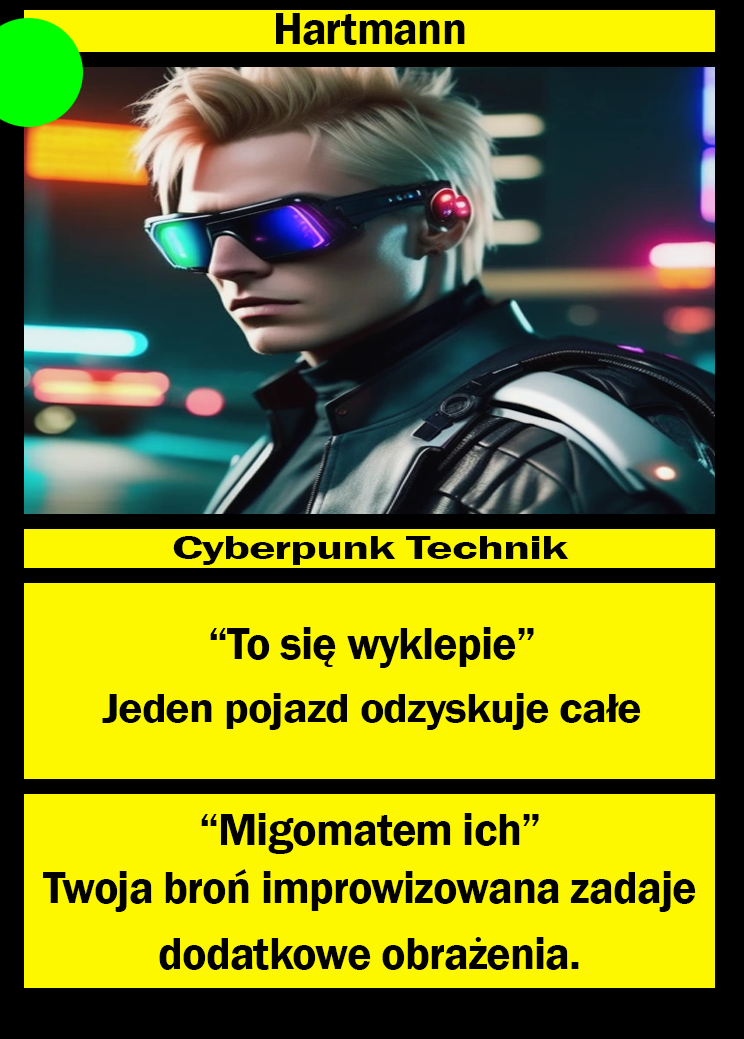
<style>
.page{position:relative;width:744px;height:1039px;background:#fdf800}
.page>*{position:absolute;margin:0}
.t1{font:45.8px "FranklinGothic-Demi";letter-spacing:-0.02em;color:#000000}
.t2{font:34px "FranklinGothic-Demi";letter-spacing:-0.02em;color:#000000;scale:1.46 1}
.t3{font:42.2px "FranklinGothic-Demi";letter-spacing:-0.02em;color:#000000;scale:1.09 1}
.t4{font:45.8px/66.7px "FranklinGothic-Demi";letter-spacing:-0.02em;color:#000000}
</style>
<div class="page">
<p class="t1" style="left:276px;top:13px;width:189px;height:32px">Hartmann</p>
<p class="t2" style="left:173px;top:536px;width:396px;height:29px">Cyberpunk Technik</p>
<p class="t1" style="left:210px;top:627px;width:324px;height:41px">“To się wyklepie”</p>
<p class="t3" style="left:102px;top:693px;width:539px;height:37px">Jeden pojazd odzyskuje całe zdrowie.</p>
<p class="t1" style="left:201px;top:813px;width:338px;height:41px">“Migomatem ich”</p>
<p class="t4" style="left:43px;top:869px;width:653px;height:101px;text-align:center">Twoja broń improwizowana zadaje <br>dodatkowe obrażenia.</p>
</div>
